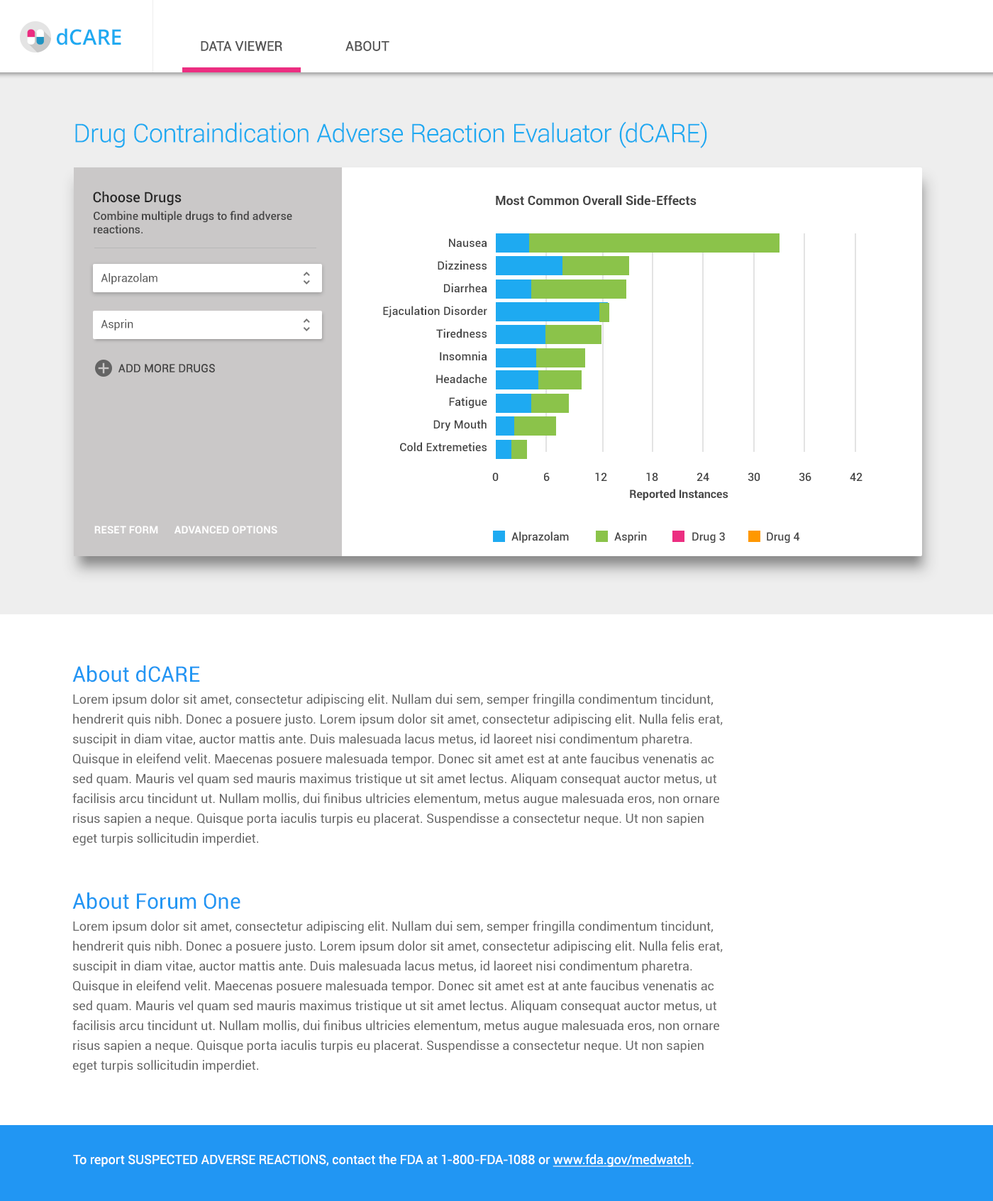
<style>
.page{position:relative;width:993px;height:1201px;background:#ffffff}
.page>*{position:absolute;margin:0}
.t1{font:21.3px "OpenSans-Semibold";color:#1eaaf1}
.t2{font:13.5px "Roboto-Regular";color:#535353;text-transform:uppercase}
.t3{font:13.5px "Roboto-Regular";letter-spacing:0.005em;color:#535353;text-transform:uppercase}
.t4{font:25.5px "Roboto-Light";color:#1eaaf1}
.t5{font:14.2px "Roboto-Medium";color:#262626}
.t6{font:12.8px "Roboto-Bold";color:#444444}
.t7{font:11.3px "Roboto-Medium";color:#444444}
.t8{font:11.3px/22.7px "Roboto-Medium";letter-spacing:0.01em;color:#444444}
.t9{font:11.3px "Roboto-Regular";color:#575757}
.t10{font:11.3px "Roboto-Regular";letter-spacing:0.01em;color:#444444;text-transform:uppercase}
.t11{font:11.3px/17px "Roboto-Medium";color:#444444}
.t12{font:11.3px/17px "Roboto-Bold";color:#444444}
.t13{font:10.6px "Roboto-Bold";letter-spacing:0.01em;color:#ffffff;text-transform:uppercase}
.t14{font:21.3px "Roboto-Regular";letter-spacing:0.005em;color:#2196f3}
.t15{font:12.8px/19.9px "Roboto-Regular";color:#666666}
.t16{font:12.8px "Roboto-Regular";color:#ffffff}
.t17{font:12.8px "Roboto-Regular";color:#ffffff;text-decoration:underline}
</style>
<div class="page">
<p class="t1" style="left:57px;top:28px;width:64px;height:17px">dCARE</p>
<p class="t2" style="left:201px;top:41px;width:81px;height:10px">Data Viewer</p>
<p class="t3" style="left:345px;top:40px;width:44px;height:11px">About</p>
<p class="t4" style="left:75px;top:121px;width:632px;height:27px">Drug Contraindication Adverse Reaction Evaluator (dCARE)</p>
<p class="t5" style="left:93px;top:191px;width:89px;height:15px">Choose Drugs</p>
<p class="t6" style="left:496px;top:195px;width:201px;height:11px">Most Common Overall Side-Effects</p>
<p class="t7" style="left:94px;top:211px;width:198px;height:23px">Combine multiple drugs to find adverse reactions.</p>
<p class="t8" style="left:383px;top:238px;width:104px;height:213px;text-align:right">Nausea<br>Dizziness<br>Diarrhea<br>Ejaculation Disorder<br>Tiredness<br>Insomnia<br>Headache<br>Fatigue<br>Dry Mouth <br>Cold Extremeties</p>
<p class="t9" style="left:101px;top:273px;width:56px;height:11px">Alprazolam</p>
<p class="t9" style="left:101px;top:319px;width:32px;height:12px">Asprin</p>
<p class="t10" style="left:118px;top:364px;width:97px;height:8px">Add more drugs</p>
<p class="t11" style="left:492px;top:472px;width:370px;height:29px">0  6  12  18  24  30  36  42<br><span class="t12">Reported Instances</span></p>
<p class="t13" style="left:94px;top:526px;width:64px;height:7px">Reset Form</p>
<p class="t13" style="left:174px;top:526px;width:103px;height:7px">Advanced Options</p>
<p class="t7" style="left:511px;top:531px;width:58px;height:12px">Alprazolam</p>
<p class="t7" style="left:614px;top:531px;width:33px;height:12px">Asprin</p>
<p class="t7" style="left:692px;top:532px;width:33px;height:11px">Drug 3</p>
<p class="t7" style="left:767px;top:532px;width:33px;height:11px">Drug 4</p>
<p class="t14" style="left:72px;top:665px;width:128px;height:17px">About dCARE</p>
<p class="t15" style="left:72px;top:694px;width:651px;height:151px">Lorem ipsum dolor sit amet, consectetur adipiscing elit. Nullam dui sem, semper fringilla condimentum tincidunt, hendrerit quis nibh. Donec a posuere justo. Lorem ipsum dolor sit amet, consectetur adipiscing elit. Nulla felis erat, suscipit in diam vitae, auctor mattis ante. Duis malesuada lacus metus, id laoreet nisi condimentum pharetra. Quisque in eleifend velit. Maecenas posuere malesuada tempor. Donec sit amet est at ante faucibus venenatis ac sed quam. Mauris vel quam sed mauris maximus tristique ut sit amet lectus. Aliquam consequat auctor metus, ut facilisis arcu tincidunt ut. Nullam mollis, dui finibus ultricies elementum, metus augue malesuada eros, non ornare risus sapien a neque. Quisque porta iaculis turpis eu placerat. Suspendisse a consectetur neque. Ut non sapien eget turpis sollicitudin imperdiet.</p>
<p class="t14" style="left:72px;top:892px;width:168px;height:17px">About Forum One</p>
<p class="t15" style="left:72px;top:921px;width:651px;height:151px">Lorem ipsum dolor sit amet, consectetur adipiscing elit. Nullam dui sem, semper fringilla condimentum tincidunt, hendrerit quis nibh. Donec a posuere justo. Lorem ipsum dolor sit amet, consectetur adipiscing elit. Nulla felis erat, suscipit in diam vitae, auctor mattis ante. Duis malesuada lacus metus, id laoreet nisi condimentum pharetra. Quisque in eleifend velit. Maecenas posuere malesuada tempor. Donec sit amet est at ante faucibus venenatis ac sed quam. Mauris vel quam sed mauris maximus tristique ut sit amet lectus. Aliquam consequat auctor metus, ut facilisis arcu tincidunt ut. Nullam mollis, dui finibus ultricies elementum, metus augue malesuada eros, non ornare risus sapien a neque. Quisque porta iaculis turpis eu placerat. Suspendisse a consectetur neque. Ut non sapien eget turpis sollicitudin imperdiet.</p>
<p class="t16" style="left:73px;top:1153px;width:621px;height:14px">To report SUSPECTED ADVERSE REACTIONS, contact the FDA at 1-800-FDA-1088 or <span class="t17">www.fda.gov/medwatch</span>.</p>
</div>
